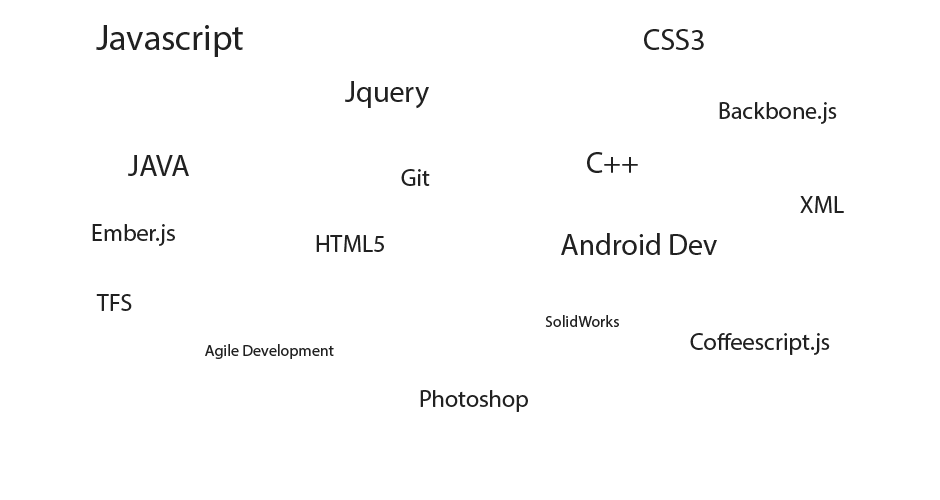
<style>
.page{position:relative;width:940px;height:500px;background:#ffffff}
.page>*{position:absolute;margin:0}
.t1{font:36px "MyriadPro-Regular";color:#212121}
.t2{font:30px "MyriadPro-Regular";color:#212121}
.t3{font:24px "MyriadPro-Regular";color:#212121}
.t4{font:16px "MyriadPro-Regular";color:#212121}
</style>
<div class="page">
<p class="t1" style="left:96px;top:25px;width:147px;height:32px">Javascript</p>
<p class="t2" style="left:644px;top:29px;width:60px;height:21px">CSS3</p>
<p class="t2" style="left:345px;top:81px;width:84px;height:28px">Jquery</p>
<p class="t3" style="left:719px;top:102px;width:118px;height:22px">Backbone.js</p>
<p class="t2" style="left:128px;top:155px;width:61px;height:21px">JAVA</p>
<p class="t2" style="left:587px;top:152px;width:51px;height:21px">C++</p>
<p class="t3" style="left:401px;top:169px;width:29px;height:17px">Git</p>
<p class="t3" style="left:92px;top:224px;width:83px;height:22px">Ember.js</p>
<p class="t2" style="left:561px;top:233px;width:156px;height:22px">Android Dev</p>
<p class="t3" style="left:316px;top:235px;width:68px;height:17px">HTML5</p>
<p class="t3" style="left:96px;top:294px;width:36px;height:17px">TFS</p>
<p class="t4" style="left:545px;top:315px;width:74px;height:12px">SolidWorks</p>
<p class="t3" style="left:690px;top:333px;width:140px;height:22px">Coffeescript.js</p>
<p class="t4" style="left:205px;top:344px;width:129px;height:15px">Agile Development</p>
<p class="t3" style="left:420px;top:390px;width:108px;height:22px">Photoshop</p>
</div>
